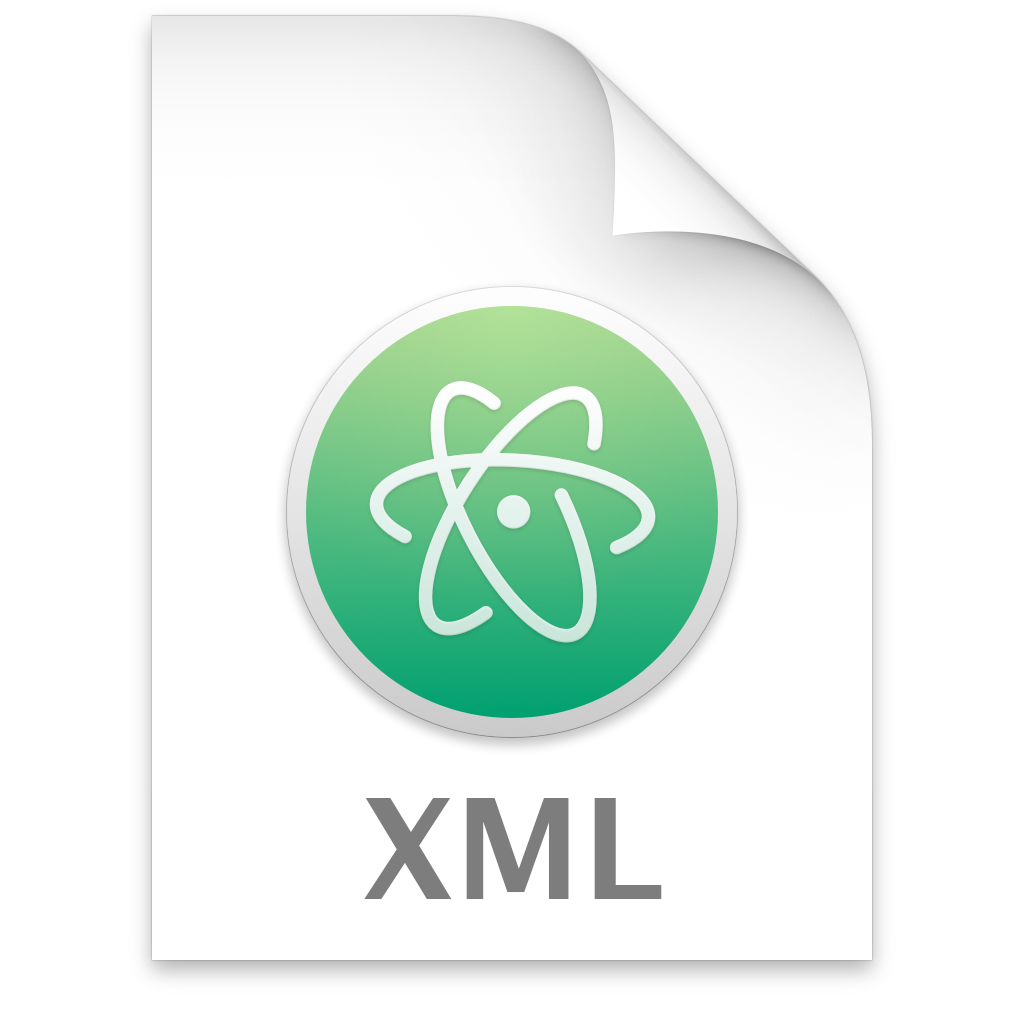
<style>
.page{position:relative;width:1024px;height:1024px;background:#ffffff}
.page>*{position:absolute;margin:0}
.t1{font:140px "LucidaGrande-Bold";color:#7d7d7d}
</style>
<div class="page">
<p class="t1" style="left:364px;top:798px;width:298px;height:101px">XML</p>
</div>
